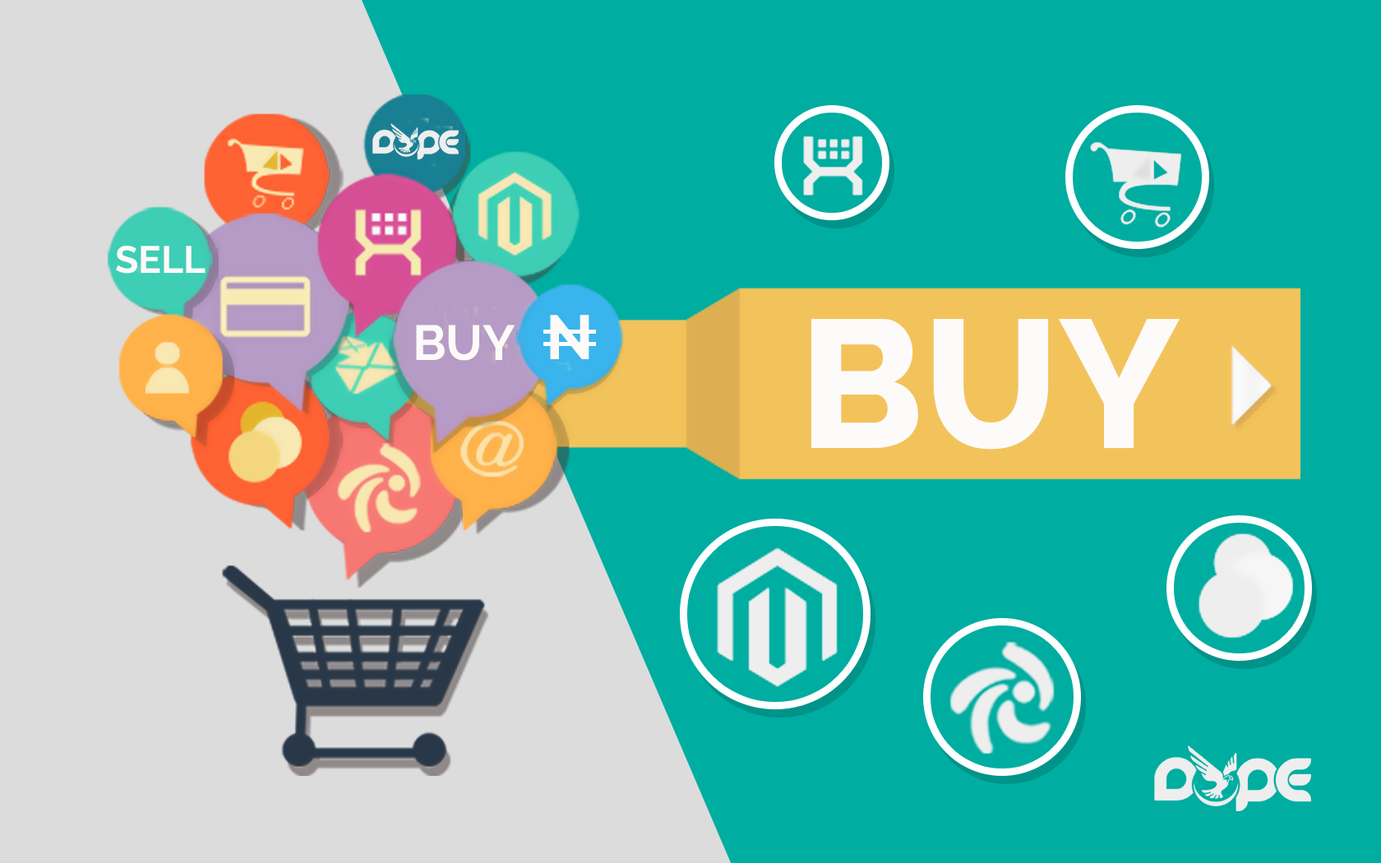
<style>
.page{position:relative;width:1381px;height:863px;background:#00ada1}
.page>*{position:absolute;margin:0}
.t1{font:38.1px "Raleway-Bold";color:#fdfafa}
.t2{font:62.3px "Raleway-Bold";color:#fdfafa}
.t3{font:49.3px "Raleway-Bold";color:#fdfafa}
.t4{font:181.7px "Raleway-ExtraBold";color:#fdfafa}
</style>
<div class="page">
<p class="t1" style="left:116px;top:246px;width:90px;height:28px">SELL</p>
<p class="t2" style="left:550px;top:315px;width:40px;height:44px">N</p>
<p class="t3" style="left:416px;top:325px;width:100px;height:36px">BUY</p>
<p class="t4" style="left:811px;top:319px;width:369px;height:131px">BUY</p>
</div>
